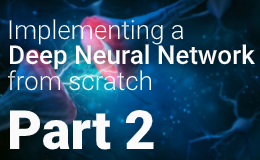
<style>
.page{position:relative;width:260px;height:160px}
.page>*{position:absolute;margin:0}
.t1{font:26px "Roboto-Light";color:#fafafa}
.t2{font:26px "Roboto-Medium";color:#fafafa}
.t3{font:54px "Roboto-Black";color:#fafafa}
</style>
<div class="page">
<p class="t1" style="left:9px;top:19px;width:174px;height:26px">Implementing a</p>
<p class="t2" style="left:9px;top:44px;width:246px;height:26px">Deep Neural Network</p>
<p class="t1" style="left:7px;top:70px;width:144px;height:21px">from scratch</p>
<p class="t3" style="left:9px;top:110px;width:145px;height:40px">Part 2</p>
</div>
